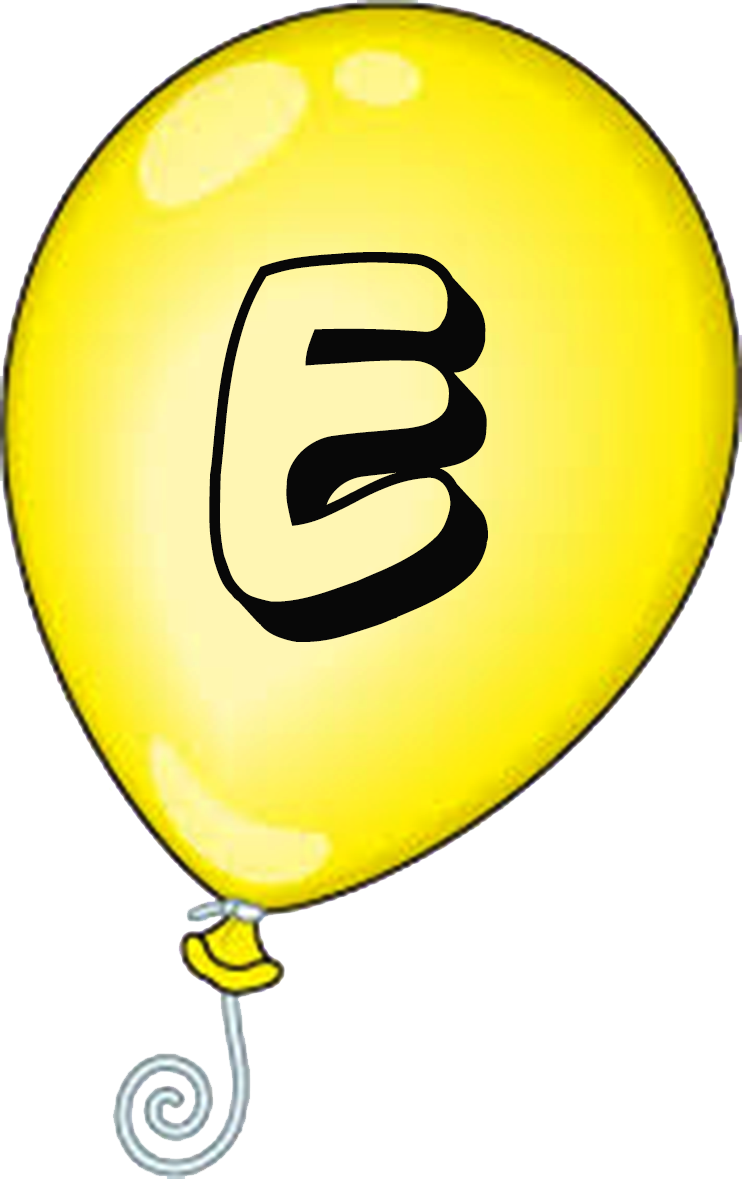
<style>
.page{position:relative;width:742px;height:1179px;background:#ffffff}
.page>*{position:absolute;margin:0}
.t1{font:500px "ActionManShaded";color:#080808}
.t2{font:200px "LucidaSans-TypewriterBold";color:#080808}
</style>
<div class="page">
<p class="t1" style="left:209px;top:252px;width:279px;height:390px"><span class="t2"><br></span>E</p>
</div>
